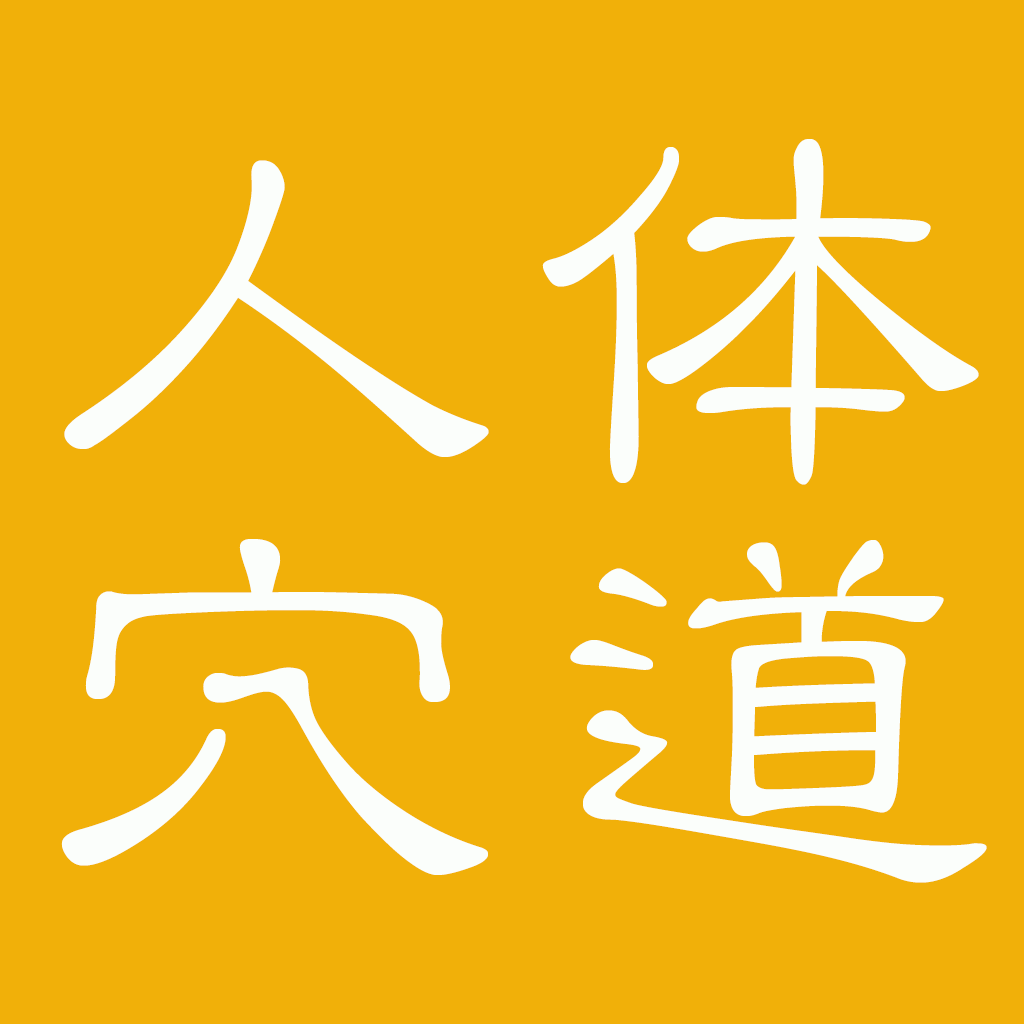
<style>
.page{position:relative;width:1024px;height:1024px;background:#f1b009}
.page>*{position:absolute;margin:0}
.t1{font:500px/400px "STLibian-SC-Regular";color:#fbfefb}
</style>
<div class="page">
<p class="t1" style="left:61px;top:139px;width:926px;height:744px;text-align:center">人体<br>穴道</p>
</div>
